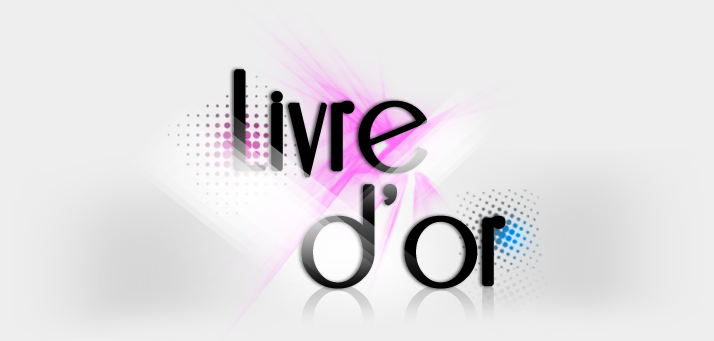
<style>
.page{position:relative;width:714px;height:341px;background:#eeeeee}
.page>*{position:absolute;margin:0}
.t1{font:160px/115px "Riesling";color:#000000;font-weight:bold}
</style>
<div class="page">
<p class="t1" style="left:234px;top:69px;width:272px;height:220px;text-align:center">Livre<br>    d’or</p>
</div>
